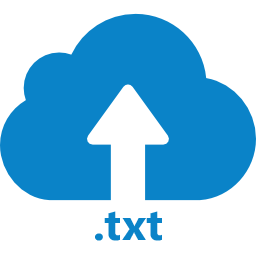
<style>
.page{position:relative;width:256px;height:256px;background:#ffffff}
.page>*{position:absolute;margin:0}
.t1{font:43.7px "SegoeUI-Bold";color:#0a83c8}
</style>
<div class="page">
<p class="t1" style="left:95px;top:211px;width:67px;height:30px">.txt</p>
</div>
